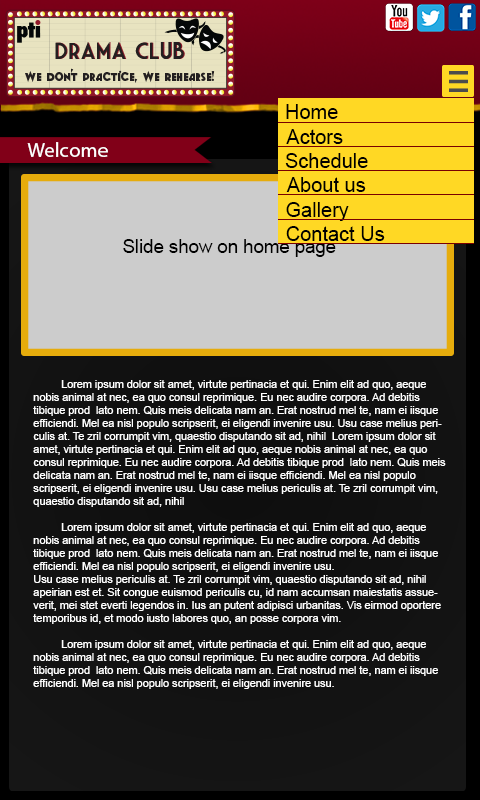
<style>
.page{position:relative;width:480px;height:800px}
.page>*{position:absolute;margin:0}
.t1{font:20px "ArialMT";color:#000000}
.t2{font:20.8px "MyriadPro-Regular";color:#ffffff}
.t3{font:18.6px "ArialMT";color:#000000}
.t4{font:10.8px "ArialMT";color:#ffffff}
</style>
<div class="page">
<p class="t1" style="left:286px;top:104px;width:52px;height:15px">Home</p>
<p class="t1" style="left:286px;top:129px;width:57px;height:15px">Actors</p>
<p class="t2" style="left:27px;top:142px;width:81px;height:15px">Welcome</p>
<p class="t1" style="left:285px;top:153px;width:83px;height:15px">Schedule</p>
<p class="t1" style="left:286px;top:177px;width:80px;height:15px">About us</p>
<p class="t1" style="left:286px;top:202px;width:63px;height:19px">Gallery</p>
<p class="t1" style="left:286px;top:226px;width:99px;height:15px">Contact Us</p>
<p class="t3" style="left:123px;top:239px;width:213px;height:18px">Slide show on home page</p>
<p class="t4" style="left:33px;top:380px;width:413px;height:309px">Lorem ipsum dolor sit amet, virtute pertinacia et qui. Enim elit ad quo, aeque nobis animal at nec, ea quo consul reprimique. Eu nec audire corpora. Ad debitis tibique prod  lato nem. Quis meis delicata nam an. Erat nostrud mel te, nam ei iisque efficiendi. Mel ea nisl populo scripserit, ei eligendi invenire usu. Usu case melius periculis at. Te zril corrumpit vim, quaestio disputando sit ad, nihil  Lorem ipsum dolor sit amet, virtute pertinacia et qui. Enim elit ad quo, aeque nobis animal at nec, ea quo consul reprimique. Eu nec audire corpora. Ad debitis tibique prod  lato nem. Quis meis delicata nam an. Erat nostrud mel te, nam ei iisque efficiendi. Mel ea nisl populo scripserit, ei eligendi invenire usu. Usu case melius periculis at. Te zril corrumpit vim, quaestio disputando sit ad, nihil <br><br> Lorem ipsum dolor sit amet, virtute pertinacia et qui. Enim elit ad quo, aeque nobis animal at nec, ea quo consul reprimique. Eu nec audire corpora. Ad debitis tibique prod  lato nem. Quis meis delicata nam an. Erat nostrud mel te, nam ei iisque efficiendi. Mel ea nisl populo scripserit, ei eligendi invenire usu.<br>Usu case melius periculis at. Te zril corrumpit vim, quaestio disputando sit ad, nihil apeirian est et. Sit congue euismod periculis cu, id nam accumsan maiestatis assueverit, mei stet everti legendos in. Ius an putent adipisci urbanitas. Vis eirmod oportere temporibus id, et modo iusto labores quo, an posse corpora vim.<br><br> Lorem ipsum dolor sit amet, virtute pertinacia et qui. Enim elit ad quo, aeque nobis animal at nec, ea quo consul reprimique. Eu nec audire corpora. Ad debitis tibique prod  lato nem. Quis meis delicata nam an. Erat nostrud mel te, nam ei iisque efficiendi. Mel ea nisl populo scripserit, ei eligendi invenire usu.</p>
</div>
